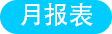
<style>
.page{position:relative;width:112px;height:34px;background:#00ccff}
.page>*{position:absolute;margin:0}
.t1{font:25px "AdobeHeitiStd-Regular";color:#ffffff}
</style>
<div class="page">
<p class="t1" style="left:20px;top:2px;width:73px;height:25px">月报表</p>
</div>
